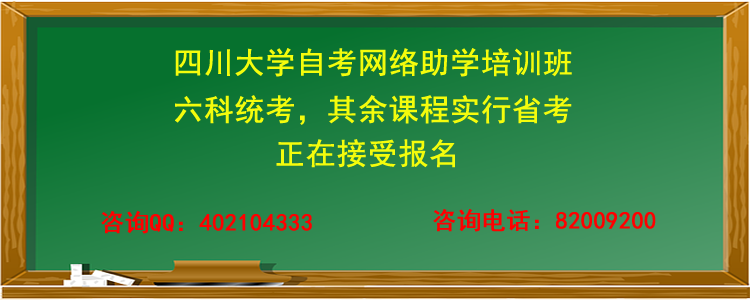
<style>
.page{position:relative;width:750px;height:300px}
.page>*{position:absolute;margin:0}
.t1{font:30px "SimHei";color:#f4fc0c;font-weight:bold}
.t2{font:24px "SimHei";color:#ff0000;font-weight:bold}
</style>
<div class="page">
<p class="t1" style="left:175px;top:48px;width:397px;height:29px">四川大学自考网络助学培训班</p>
<p class="t1" style="left:175px;top:95px;width:397px;height:30px">六科统考，其余课程实行省考</p>
<p class="t1" style="left:276px;top:139px;width:179px;height:29px">正在接受报名</p>
<p class="t2" style="left:433px;top:209px;width:223px;height:23px">咨询电话：82009200</p>
<p class="t2" style="left:101px;top:211px;width:211px;height:23px">咨询QQ：402104333</p>
</div>
